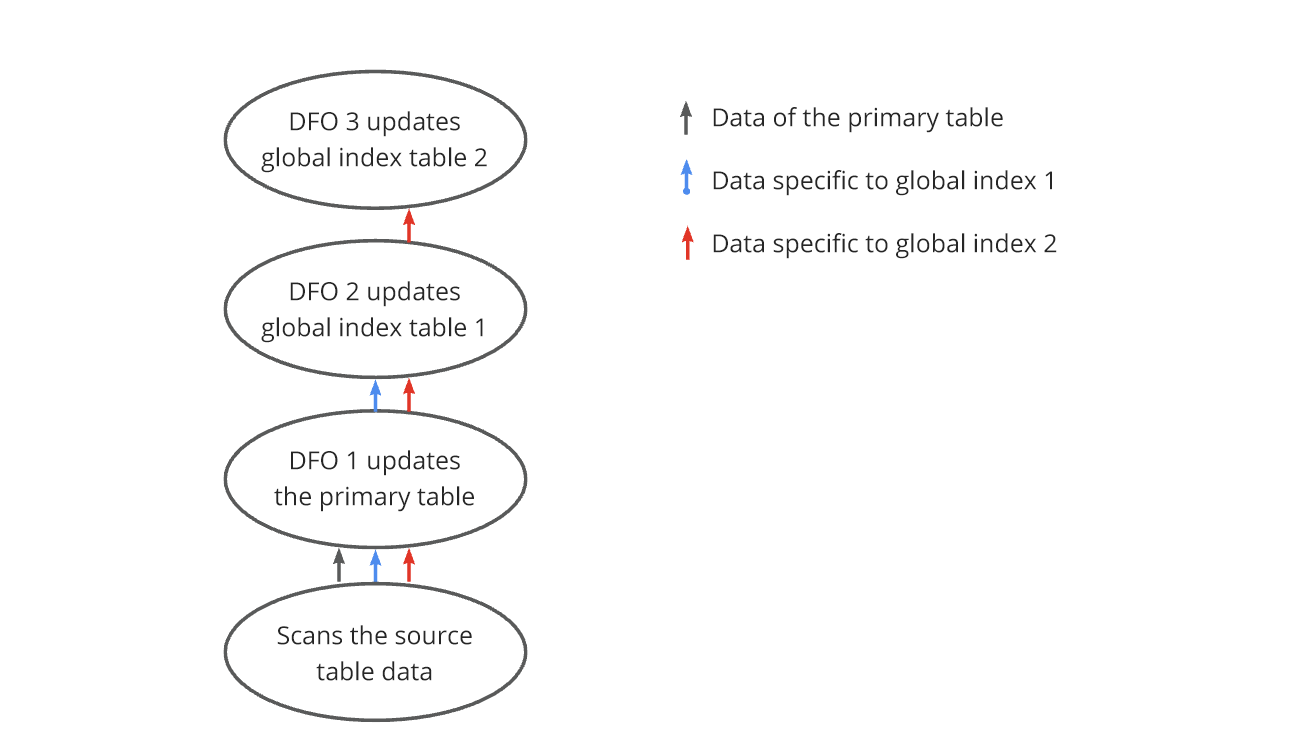
<style>
.page{position:relative;width:1314px;height:740px;background:#ffffff}
.page>*{position:absolute;margin:0}
.t1{font:25px/36px "OpenSans";color:#262626}
.t2{font:25px/58px "OpenSans";color:#262626}
</style>
<div class="page">
<p class="t1" style="left:261px;top:111px;width:226px;height:62px;text-align:center">DFO 3 updates global index table 2</p>
<p class="t2" style="left:713px;top:107px;width:344px;height:152px">Data of the primary table <br>Data specific to global index 1<br>Data specific to global index 2</p>
<p class="t1" style="left:261px;top:281px;width:222px;height:62px;text-align:center">DFO 2 updates global index table 1</p>
<p class="t1" style="left:274px;top:450px;width:200px;height:62px;text-align:center">DFO 1 updates the primary table</p>
<p class="t1" style="left:277px;top:625px;width:195px;height:56px;text-align:center">Scans the source table data</p>
</div>
